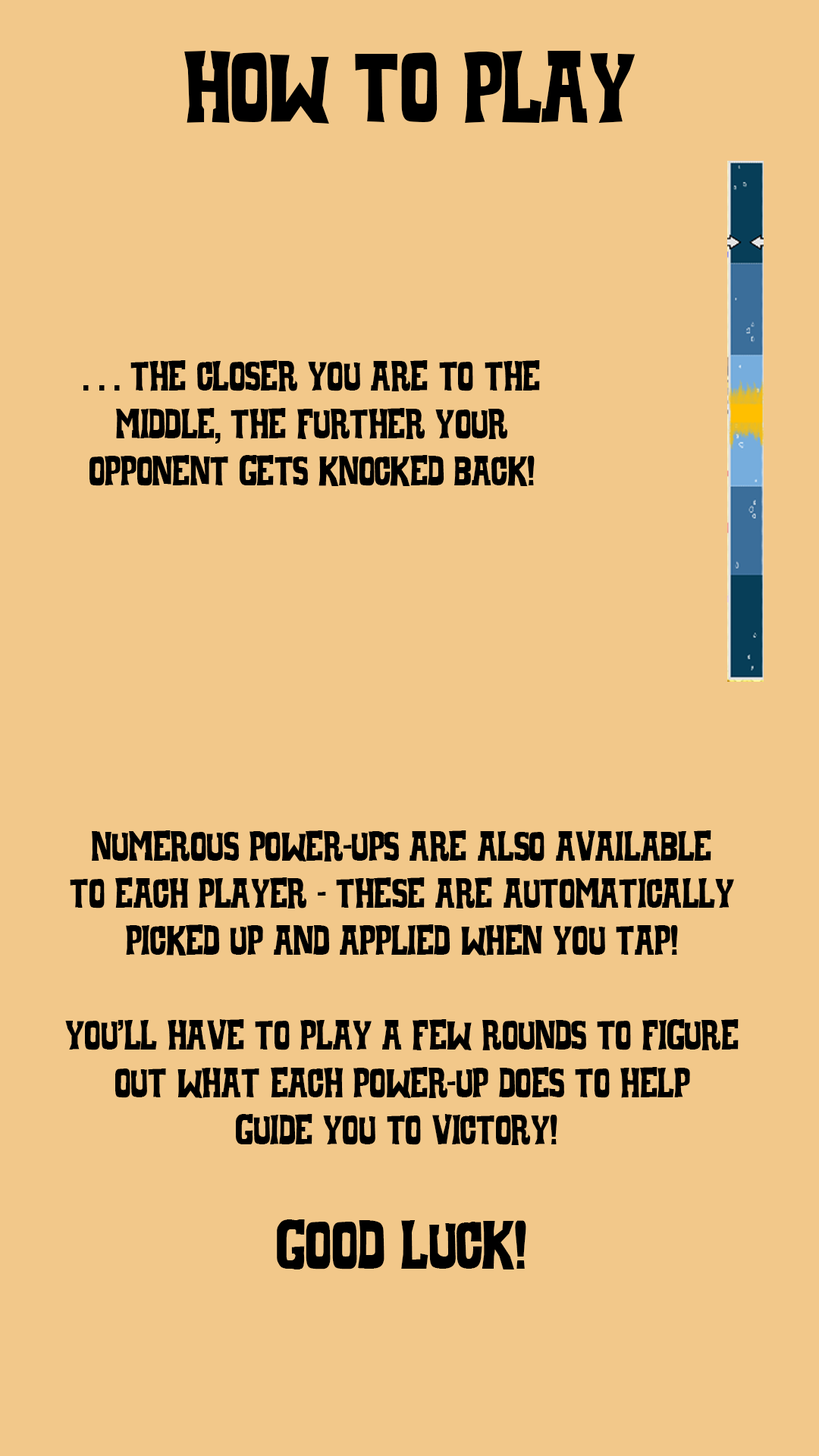
<style>
.page{position:relative;width:819px;height:1456px;background:#f2c88a}
.page>*{position:absolute;margin:0}
.t1{font:94.8px "WhiskeyTown-Sober";color:#000000}
.t2{font:39.4px "WhiskeyTown-Sober";color:#000000}
.t3{font:64.5px "WhiskeyTown-Sober";color:#000000}
</style>
<div class="page">
<p class="t1" style="left:184px;top:51px;width:451px;height:73px">How to Play</p>
<p class="t2" style="left:83px;top:360px;width:457px;height:126px;text-align:center">. . . The Closer you are to the<br>middle, the further your<br>opponent gets knocked back!</p>
<p class="t2" style="left:65px;top:830px;width:674px;height:439px;text-align:center">Numerous Power-ups are also available<br>to each player - these are automatically<br>picked up and applied when you tap!<br><br>You'll have to play a few rounds to figure<br>out what each power-up does to help<br>guide you to victory! <br><br><span class="t3">Good luck!</span></p>
</div>
